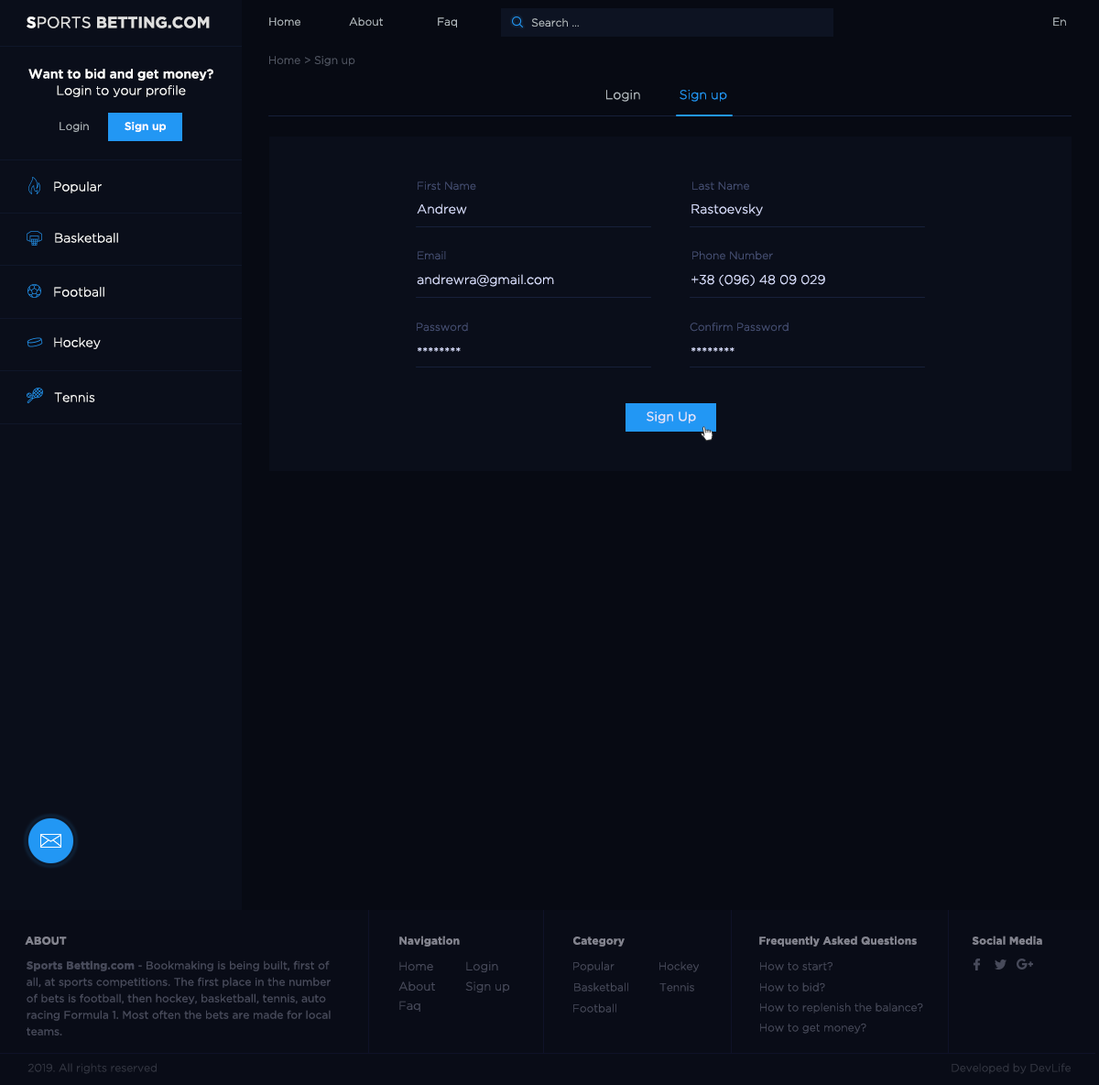
<style>
.page{position:relative;width:1099px;height:1085px;background:#070a13}
.page>*{position:absolute;margin:0}
.t1{font:15.6px "GothamPro-Bold";color:#dfdfdf;text-transform:uppercase}
.t2{font:15.6px "GothamPro-Bold";color:#ffffff;text-transform:uppercase}
.t3{font:15.6px "GothamPro";color:#dfdfdf;text-transform:uppercase}
.t4{font:11px "GothamPro-Light";color:#b5bdc2}
.t5{font:11px "GothamPro-Light";color:#525764}
.t6{font:12.8px/16.5px "GothamPro-Medium";color:#ffffff}
.t7{font:12.8px/16.5px "GothamPro-Light";color:#ffffff}
.t8{font:12.8px "GothamPro-Light";color:#b5bdc2}
.t9{font:12.8px "GothamPro-Light";color:#2297f4}
.t10{font:11px "GothamPro-Medium";color:#ffffff}
.t11{font:12.8px "GothamPro-Light";color:#ffffff}
.t12{font:11px "GothamPro-Light";color:#454f73}
.t13{font:12.8px "GothamPro-Light";color:#d9dfff}
.t14{font:12.8px "GothamPro";color:#dfe4f8}
.t15{font:11px "GothamPro-Bold";color:#83848f}
.t16{font:11px/16.5px "GothamPro";color:#474a5a}
.t17{font:11px/16.5px "GothamPro-Bold";color:#474a5a}
.t18{font:11.9px "GothamPro-Light";color:#474a5a}
.t19{font:11px "GothamPro-Light";color:#474a5a}
.t20{font:11px "GothamPro-Light";color:#333642}
</style>
<div class="page">
<p class="t1" style="left:27px;top:16px;width:183px;height:12px"><span class="t2">s</span><span class="t3">ports </span>betting.com</p>
<p class="t4" style="left:269px;top:17px;width:31px;height:9px">Home</p>
<p class="t4" style="left:349px;top:17px;width:34px;height:9px">About</p>
<p class="t4" style="left:438px;top:17px;width:19px;height:10px">Faq</p>
<p class="t4" style="left:1054px;top:17px;width:12px;height:9px">En</p>
<p class="t4" style="left:531px;top:18px;width:48px;height:9px">Search ...</p>
<p class="t5" style="left:269px;top:56px;width:86px;height:10px">Home &gt; Sign up</p>
<p class="t6" style="left:28px;top:69px;width:185px;height:28px;text-align:center">Want to bid and get money?<br><span class="t7">Login to your profile</span></p>
<p class="t8" style="left:606px;top:90px;width:34px;height:12px">Login</p>
<p class="t9" style="left:680px;top:90px;width:47px;height:12px">Sign up</p>
<p class="t4" style="left:60px;top:122px;width:29px;height:10px">Login</p>
<p class="t10" style="left:125px;top:122px;width:41px;height:10px">Sign up</p>
<p class="t11" style="left:54px;top:181px;width:48px;height:12px">Popular</p>
<p class="t12" style="left:418px;top:181px;width:58px;height:10px">First Name</p>
<p class="t12" style="left:693px;top:181px;width:56px;height:10px">Last Name</p>
<p class="t13" style="left:417px;top:203px;width:50px;height:11px">Andrew</p>
<p class="t13" style="left:692px;top:203px;width:71px;height:13px">Rastoevsky</p>
<p class="t11" style="left:55px;top:233px;width:63px;height:10px">Basketball</p>
<p class="t12" style="left:418px;top:251px;width:28px;height:9px">Email</p>
<p class="t12" style="left:693px;top:251px;width:80px;height:9px">Phone Number</p>
<p class="t13" style="left:417px;top:274px;width:137px;height:13px">andrewra@gmail.com</p>
<p class="t13" style="left:692px;top:274px;width:133px;height:12px">+38 (096) 48 09 029</p>
<p class="t11" style="left:54px;top:287px;width:50px;height:10px">Football</p>
<p class="t12" style="left:417px;top:322px;width:51px;height:10px">Password</p>
<p class="t12" style="left:690px;top:322px;width:99px;height:10px">Confirm Password</p>
<p class="t11" style="left:54px;top:337px;width:47px;height:12px">Hockey</p>
<p class="t13" style="left:418px;top:347px;width:43px;height:5px">********</p>
<p class="t13" style="left:692px;top:347px;width:43px;height:5px">********</p>
<p class="t11" style="left:54px;top:392px;width:41px;height:10px">Tennis</p>
<p class="t14" style="left:647px;top:411px;width:49px;height:12px">Sign Up</p>
<p class="t15" style="left:25px;top:936px;width:42px;height:9px">ABOUT</p>
<p class="t15" style="left:399px;top:935px;width:61px;height:11px">Navigation</p>
<p class="t15" style="left:573px;top:936px;width:52px;height:10px">Category</p>
<p class="t15" style="left:759px;top:935px;width:158px;height:11px">Frequently Asked Questions</p>
<p class="t15" style="left:972px;top:935px;width:71px;height:10px">Social Media</p>
<p class="t16" style="left:27px;top:960px;width:304px;height:75px"><span class="t17">Sports Betting.com</span> - Bookmaking is being built, first of all, at sports competitions. The first place in the number of bets is football, then hockey, basketball, tennis, auto racing Formula 1. Most often the bets are made for local teams.</p>
<p class="t18" style="left:399px;top:961px;width:34px;height:10px">Home</p>
<p class="t18" style="left:466px;top:961px;width:32px;height:11px">Login</p>
<p class="t19" style="left:573px;top:961px;width:42px;height:11px">Popular</p>
<p class="t19" style="left:660px;top:961px;width:39px;height:11px">Hockey</p>
<p class="t19" style="left:760px;top:961px;width:73px;height:9px">How to start?</p>
<p class="t18" style="left:399px;top:981px;width:36px;height:10px">About</p>
<p class="t18" style="left:465px;top:981px;width:44px;height:11px">Sign up</p>
<p class="t19" style="left:574px;top:982px;width:54px;height:9px">Basketball</p>
<p class="t19" style="left:660px;top:982px;width:34px;height:9px">Tennis</p>
<p class="t19" style="left:760px;top:982px;width:65px;height:9px">How to bid?</p>
<p class="t18" style="left:399px;top:1000px;width:21px;height:11px">Faq</p>
<p class="t19" style="left:573px;top:1003px;width:44px;height:9px">Football</p>
<p class="t19" style="left:760px;top:1002px;width:163px;height:11px">How to replenish the balance?</p>
<p class="t19" style="left:760px;top:1022px;width:107px;height:11px">How to get money?</p>
<p class="t20" style="left:27px;top:1063px;width:130px;height:11px">2019. All rights reserved</p>
<p class="t20" style="left:952px;top:1063px;width:119px;height:11px">Developed by DevLife</p>
</div>
